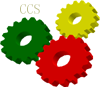
<style>
.page{position:relative;width:100px;height:87px;background:#ffffff}
.page>*{position:absolute;margin:0}
.t1{font:14.2px "SimSun";color:#bfbf8f}
</style>
<div class="page">
<p class="t1" style="left:20px;top:4px;width:20px;height:10px">CCS</p>
</div>
